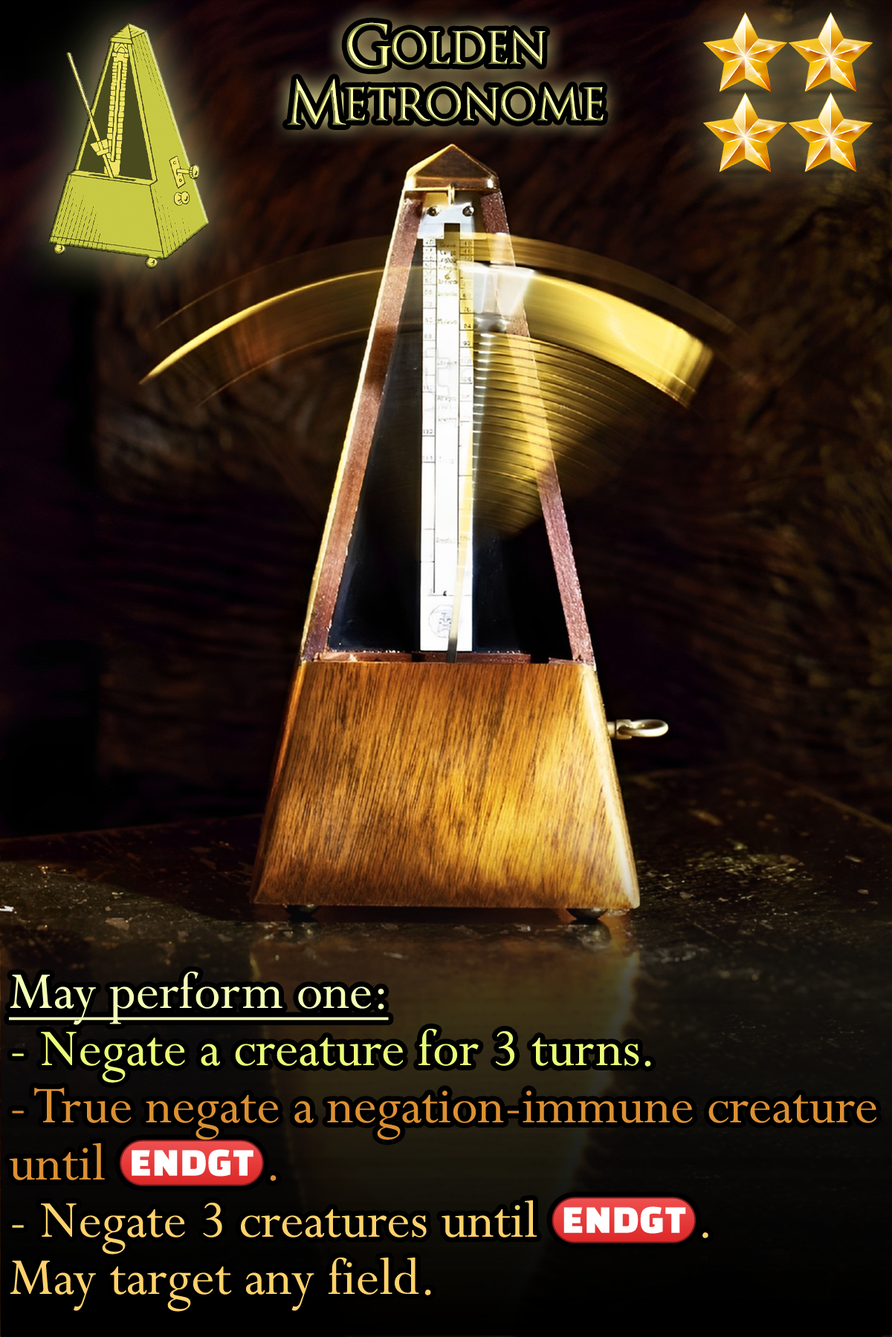
<style>
.page{position:relative;width:892px;height:1337px}
.page>*{position:absolute;margin:0}
.t1{font:102.5px/56.5px "OptimusPrinceps"}
.t2{font:98.8px/57.2px "Perpetua"}
.t3{font:98.8px/57.2px "Perpetua";text-decoration:underline}
.t4{font:80.4px/57.2px "stoogedings-Regular"}
</style>
<div class="page">
<p class="t1" style="left:287px;top:22px;width:316px;height:104px;text-align:center">Golden<br>Metronome</p>
<p class="t2" style="left:9px;top:972px;width:867px;height:340px"><span class="t3">May perform one:<br></span>- Negate a creature for 3 turns.<br>- True negate a negation-immune creature until <span class="t4">(ENDGT)</span>.<br>- Negate 3 creatures until <span class="t4">(ENDGT)</span>.<br>May target any field.</p>
</div>
